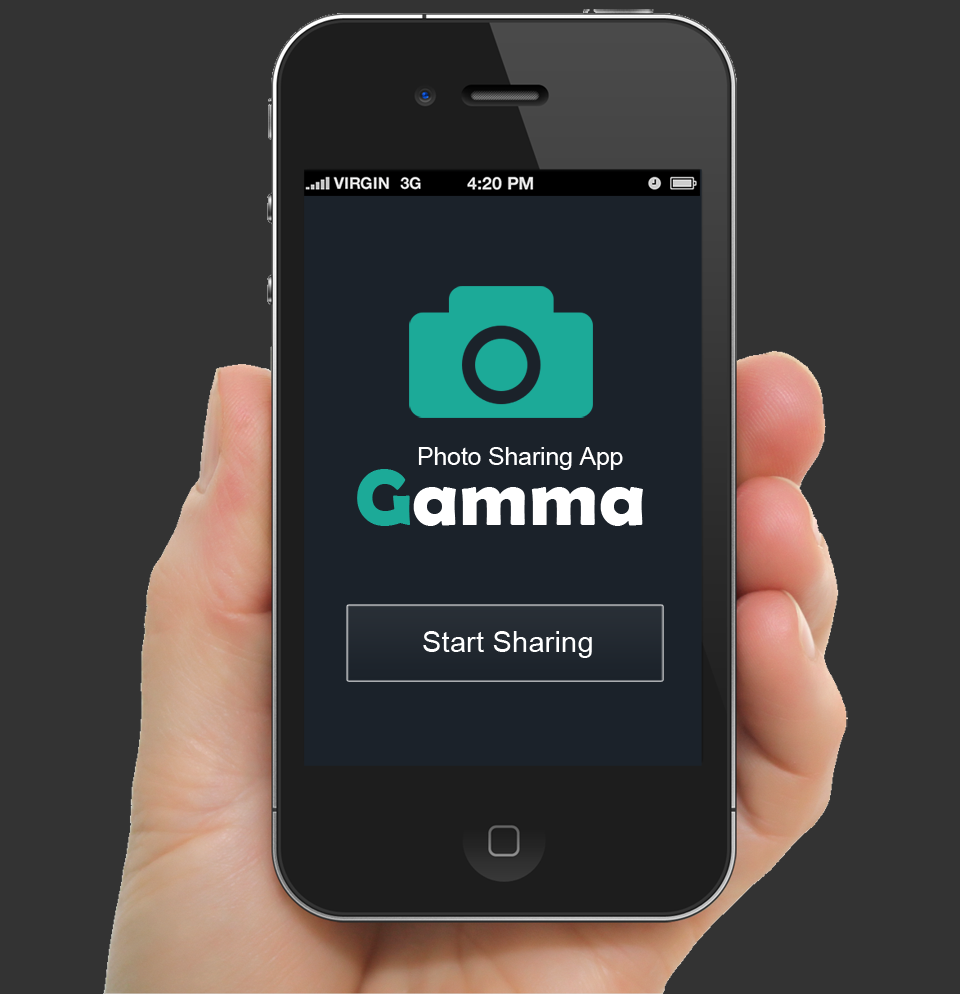
<style>
.page{position:relative;width:960px;height:994px;background:#333333}
.page>*{position:absolute;margin:0}
.t1{font:24.5px "ArialMT";color:#ffffff}
.t2{font:80.2px "BerlinSansFBDemi-Bold";color:#ffffff}
.t3{font:80.2px "BerlinSansFBDemi-Bold";color:#1caa98}
.t4{font:29.4px "ArialMT";color:#ffffff}
</style>
<div class="page">
<p class="t1" style="left:418px;top:447px;width:205px;height:23px">Photo Sharing App</p>
<p class="t2" style="left:357px;top:469px;width:286px;height:57px"><span class="t3">G</span>amma</p>
<p class="t4" style="left:423px;top:631px;width:169px;height:27px">Start Sharing</p>
</div>
